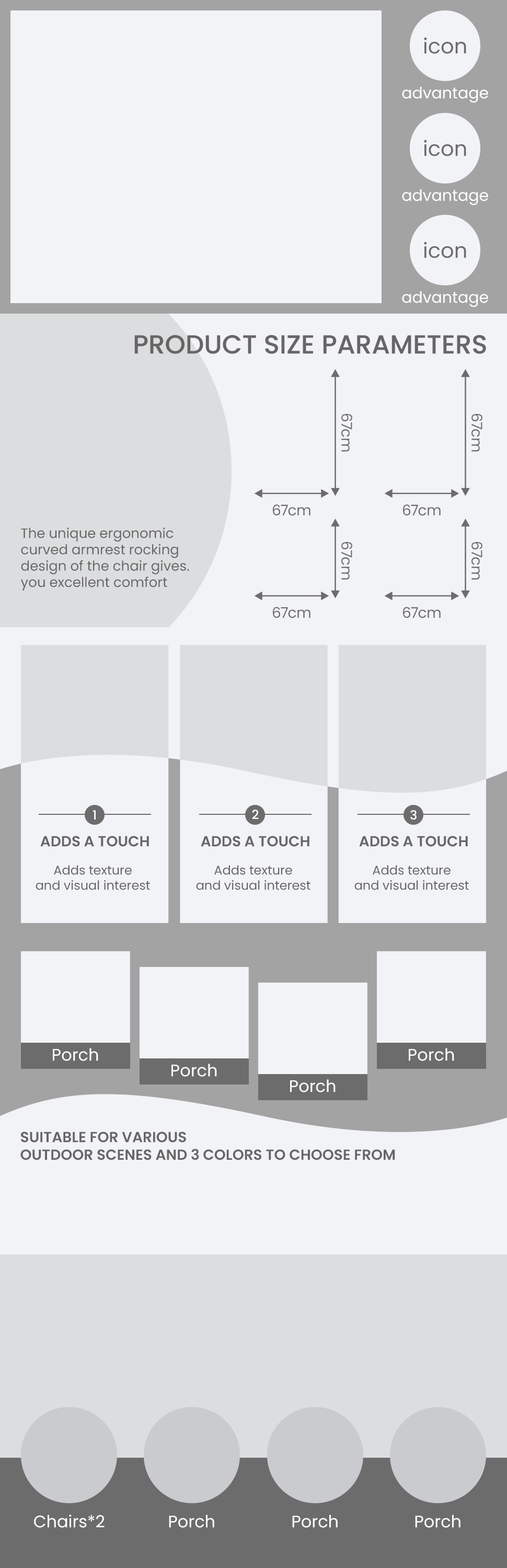
<style>
.page{position:relative;width:507px;height:1568px;background:#f2f3f6}
.page>*{position:absolute;margin:0}
.t1{font:20.9px "Poppins-Regular";color:#6c6c6c}
.t2{font:15.7px "Poppins-Regular";color:#ffffff}
.t3{font:26.1px "Poppins-Medium";color:#666666}
.t4{font:14.6px "Poppins-Regular";color:#6c6c6c}
.t5{font:13.6px "Poppins-Regular";color:#666666}
.t6{font:12.5px "Poppins-Medium";color:#ffffff}
.t7{font:14.6px "Poppins-SemiBold";color:#666666;text-transform:uppercase}
.t8{font:12.5px "Poppins-Regular";color:#666666}
.t9{font:16.7px "Poppins-Regular";color:#ffffff}
</style>
<div class="page">
<p class="t1" style="left:424px;top:37px;width:42px;height:17px">icon</p>
<p class="t2" style="left:402px;top:87px;width:86px;height:16px">advantage</p>
<p class="t1" style="left:424px;top:140px;width:42px;height:16px">icon</p>
<p class="t2" style="left:402px;top:189px;width:86px;height:16px">advantage</p>
<p class="t1" style="left:424px;top:241px;width:42px;height:17px">icon</p>
<p class="t2" style="left:402px;top:291px;width:86px;height:16px">advantage</p>
<p class="t3" style="left:134px;top:335px;width:352px;height:19px">PRODUCT SIZE PARAMETERS</p>
<p class="t4" style="left:341px;top:414px;width:11px;height:38px;rotate:90deg">67cm</p>
<p class="t4" style="left:471px;top:414px;width:11px;height:38px;rotate:90deg">67cm</p>
<p class="t4" style="left:273px;top:504px;width:37px;height:12px">67cm</p>
<p class="t4" style="left:403px;top:504px;width:38px;height:12px">67cm</p>
<p class="t5" style="left:20px;top:527px;width:169px;height:64px">The unique ergonomic<br>curved armrest rocking<br>design of the chair gives.<br>you excellent comfort</p>
<p class="t4" style="left:341px;top:542px;width:11px;height:38px;rotate:90deg">67cm</p>
<p class="t4" style="left:471px;top:542px;width:11px;height:38px;rotate:90deg">67cm</p>
<p class="t4" style="left:273px;top:607px;width:37px;height:11px">67cm</p>
<p class="t4" style="left:403px;top:607px;width:38px;height:11px">67cm</p>
<p class="t6" style="left:252px;top:810px;width:7px;height:9px">2</p>
<p class="t6" style="left:93px;top:810px;width:3px;height:10px">1</p>
<p class="t6" style="left:410px;top:810px;width:7px;height:10px">3</p>
<p class="t7" style="left:40px;top:836px;width:109px;height:11px">Adds a touch</p>
<p class="t7" style="left:201px;top:836px;width:108px;height:11px">Adds a touch</p>
<p class="t7" style="left:359px;top:836px;width:109px;height:11px">Adds a touch</p>
<p class="t8" style="left:36px;top:865px;width:114px;height:25px;text-align:center">Adds texture<br>and visual interest</p>
<p class="t8" style="left:196px;top:865px;width:114px;height:25px;text-align:center">Adds texture<br>and visual interest</p>
<p class="t8" style="left:354px;top:865px;width:115px;height:25px;text-align:center">Adds texture<br>and visual interest</p>
<p class="t9" style="left:53px;top:1048px;width:45px;height:13px">Porch</p>
<p class="t9" style="left:409px;top:1048px;width:45px;height:13px">Porch</p>
<p class="t9" style="left:171px;top:1064px;width:46px;height:13px">Porch</p>
<p class="t9" style="left:290px;top:1079px;width:46px;height:13px">Porch</p>
<p class="t7" style="left:20px;top:1132px;width:375px;height:28px">Suitable for various<br>outdoor scenes and 3 colors to choose from</p>
<p class="t9" style="left:34px;top:1515px;width:71px;height:13px">Chairs*2</p>
<p class="t9" style="left:169px;top:1515px;width:45px;height:13px">Porch</p>
<p class="t9" style="left:292px;top:1515px;width:46px;height:13px">Porch</p>
<p class="t9" style="left:415px;top:1515px;width:45px;height:13px">Porch</p>
</div>
